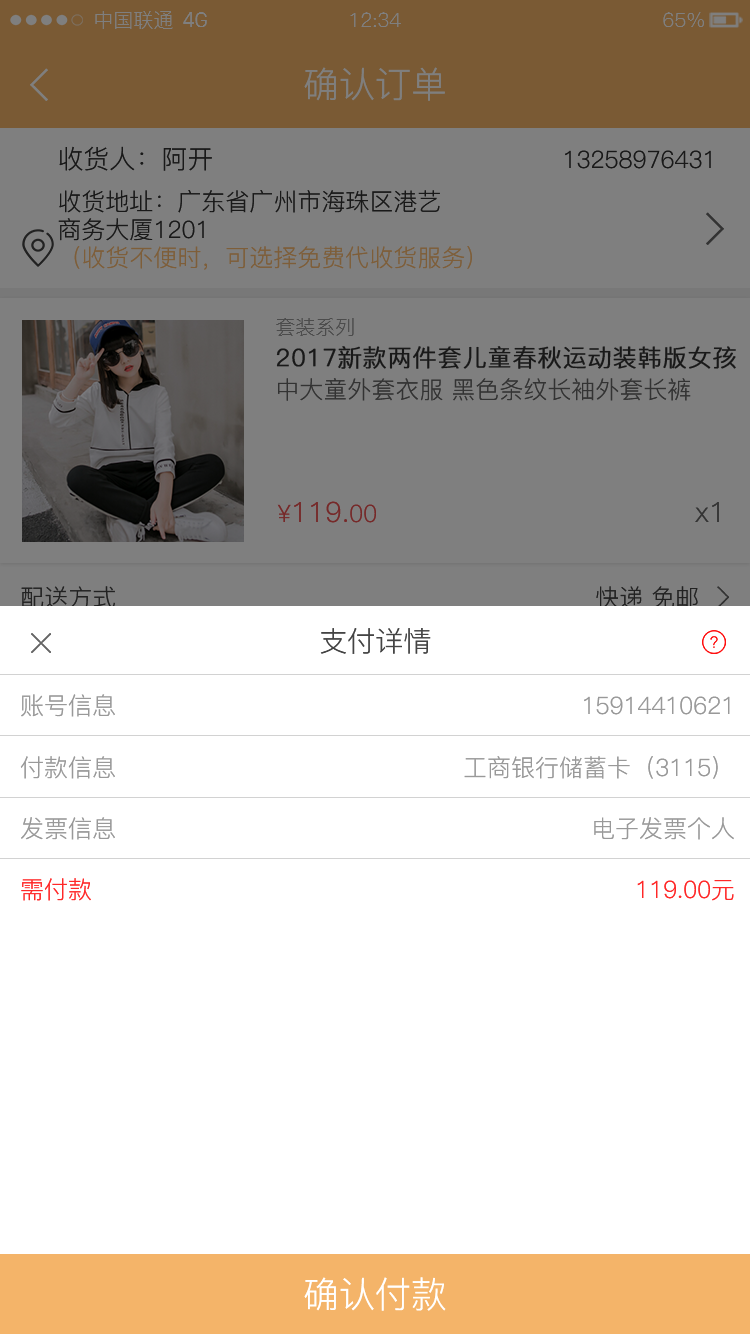
<style>
.page{position:relative;width:750px;height:1334px;background:#ffffff}
.page>*{position:absolute;margin:0}
.t1{font:20px "PingFang-SC-Regular";color:#7f7f7f}
.t2{font:20px "SanFranciscoDisplay";color:#7f7f7f}
.t3{font:36px "PingFang-SC-Regular";color:#7f7f7f}
.t4{font:26px "PingFang-SC-Regular";color:#191919}
.t5{font:24px "PingFang-SC-Regular";color:#191919}
.t6{font:24px/28px "PingFang-SC-Regular";color:#191919}
.t7{font:24px "PingFang-SC-Regular";color:#7e5e39}
.t8{font:20px "PingFang-SC-Regular";color:#4c4c4c}
.t9{font:24px "PingFang-SC-Regular";color:#191919;font-weight:bold}
.t10{font:24px "PingFang-SC-Regular";color:#333333}
.t11{font:28px "PingFang-SC-Regular";color:#762929}
.t12{font:24px "PingFang-SC-Regular";color:#762929}
.t13{font:28px "PingFang-SC-Regular";color:#333333}
.t14{font:24px "PingFang-SC-Regular";color:#222222}
.t15{font:28px "PingFang-SC-Regular";color:#444444}
.t16{font:24px "PingFang-SC-Regular";color:#999999}
.t17{font:24px "PingFang-SC-Regular";color:#ff2828}
.t18{font:36px "PingFang-SC-Regular";color:#ffffff}
</style>
<div class="page">
<p class="t1" style="left:95px;top:11px;width:78px;height:18px">中国联通</p>
<p class="t2" style="left:183px;top:12px;width:24px;height:15px">4G</p>
<p class="t1" style="left:350px;top:12px;width:51px;height:15px">12:34</p>
<p class="t1" style="left:663px;top:12px;width:41px;height:15px">65%</p>
<p class="t3" style="left:304px;top:67px;width:141px;height:34px">确认订单</p>
<p class="t4" style="left:59px;top:146px;width:153px;height:25px">收货人：阿开</p>
<p class="t5" style="left:565px;top:150px;width:146px;height:19px">13258976431</p>
<p class="t6" style="left:58px;top:190px;width:382px;height:51px">收货地址：广东省广州市海珠区港艺<br>商务大厦1201</p>
<p class="t7" style="left:74px;top:246px;width:398px;height:24px">（收货不便时，可选择免费代收货服务）</p>
<p class="t8" style="left:276px;top:318px;width:78px;height:18px">套装系列</p>
<p class="t9" style="left:276px;top:346px;width:460px;height:23px">2017新款两件套儿童春秋运动装韩版女孩</p>
<p class="t10" style="left:278px;top:378px;width:413px;height:23px">中大童外套衣服 黑色条纹长袖外套长裤</p>
<p class="t11" style="left:277px;top:501px;width:99px;height:22px"><span class="t12">¥</span>119.<span class="t12">00</span></p>
<p class="t13" style="left:695px;top:502px;width:24px;height:20px">x1</p>
<p class="t14" style="left:21px;top:586px;width:94px;height:23px">配送方式</p>
<p class="t14" style="left:596px;top:586px;width:102px;height:23px">快递 免邮</p>
<p class="t15" style="left:320px;top:628px;width:111px;height:26px">支付详情</p>
<p class="t16" style="left:21px;top:694px;width:94px;height:23px">账号信息</p>
<p class="t16" style="left:584px;top:696px;width:146px;height:19px">15914410621</p>
<p class="t16" style="left:20px;top:756px;width:95px;height:23px">付款信息</p>
<p class="t16" style="left:464px;top:756px;width:254px;height:23px">工商银行储蓄卡（3115）</p>
<p class="t16" style="left:21px;top:817px;width:94px;height:23px">发票信息</p>
<p class="t16" style="left:594px;top:817px;width:140px;height:23px">电子发票个人</p>
<p class="t17" style="left:21px;top:878px;width:70px;height:23px">需付款</p>
<p class="t17" style="left:637px;top:880px;width:97px;height:21px">119.00元</p>
<p class="t18" style="left:304px;top:1277px;width:142px;height:34px">确认付款</p>
</div>
